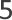
<style>
.page{position:relative;width:12px;height:20px;background:#ffffff}
.page>*{position:absolute;margin:0}
.t1{font:30px "Calibri";color:#3c3c3c}
</style>
<div class="page">
<p class="t1" style="left:0px;top:0px;width:12px;height:20px">5</p>
</div>
